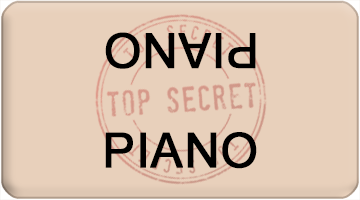
<style>
.page{position:relative;width:360px;height:200px;background:#e8d0bb}
.page>*{position:absolute;margin:0}
.t1{font:48px "ArialMT";color:#000000;font-weight:bold}
</style>
<div class="page">
<p class="t1" style="left:105px;top:32px;width:151px;height:37px;rotate:180deg">PIANO</p>
<p class="t1" style="left:105px;top:132px;width:152px;height:37px">PIANO</p>
</div>
